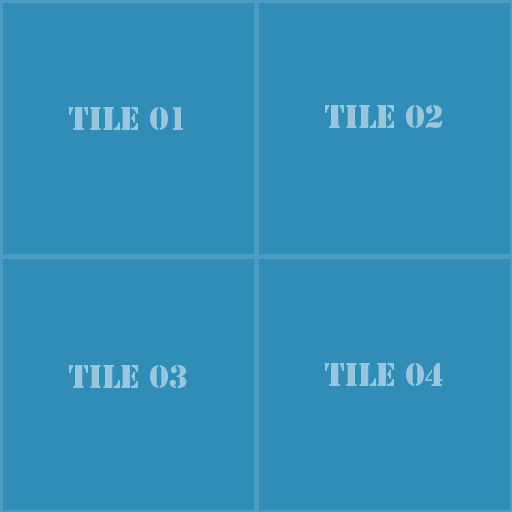
<style>
.page{position:relative;width:512px;height:512px;background:#308db8}
.page>*{position:absolute;margin:0}
.t1{font:30px "StencilStd";color:#98c6dc}
</style>
<div class="page">
<p class="t1" style="left:69px;top:107px;width:114px;height:23px">Tile 01</p>
<p class="t1" style="left:325px;top:105px;width:118px;height:23px">Tile 02</p>
<p class="t1" style="left:69px;top:365px;width:118px;height:23px">Tile 03</p>
<p class="t1" style="left:325px;top:363px;width:118px;height:23px">Tile 04</p>
</div>
